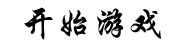
<style>
.page{position:relative;width:186px;height:48px;background:#ffffff}
.page>*{position:absolute;margin:0}
.t1{font:36px "STXingkai";color:#000000}
</style>
<div class="page">
<p class="t1" style="left:24px;top:7px;width:137px;height:33px">开始游戏</p>
</div>
